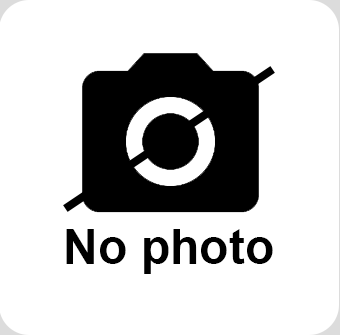
<style>
.page{position:relative;width:340px;height:335px;background:#ffffff}
.page>*{position:absolute;margin:0}
.t1{font:48px "Arial-BoldMT";color:#000000}
</style>
<div class="page">
<p class="t1" style="left:66px;top:229px;width:207px;height:45px">No photo</p>
</div>
